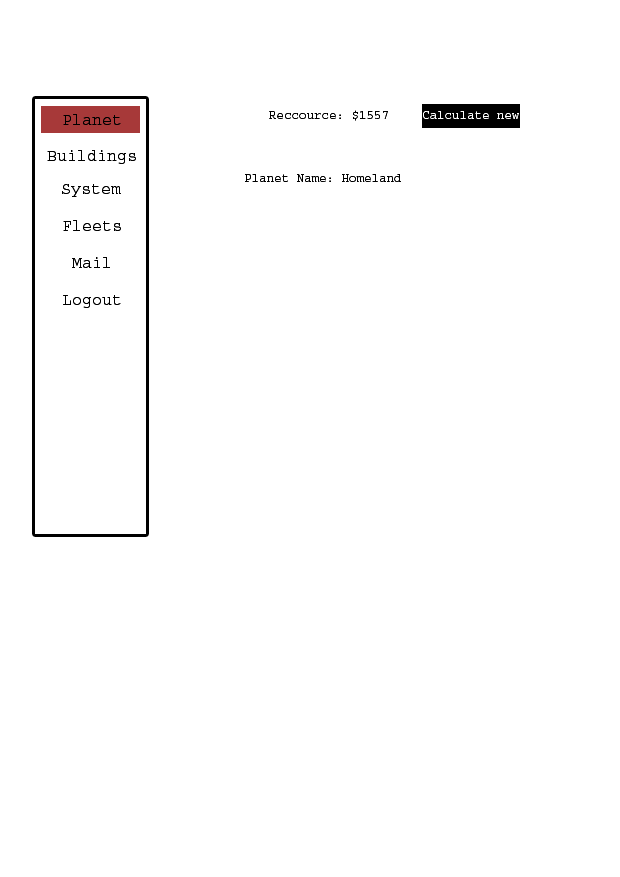
<style>
.page{position:relative;width:620px;height:877px;background:#ffffff}
.page>*{position:absolute;margin:0}
.t1{font:12.5px "Courier";color:#000000}
.t2{font:12.5px "Courier";color:#ffffff}
.t3{font:16.7px "Courier";color:#000000}
</style>
<div class="page">
<p class="t1" style="left:269px;top:110px;width:119px;height:11px">Reccource: $1557</p>
<p class="t2" style="left:423px;top:111px;width:96px;height:8px">Calculate new</p>
<p class="t3" style="left:63px;top:114px;width:58px;height:11px">Planet</p>
<p class="t3" style="left:47px;top:150px;width:89px;height:14px">Buildings</p>
<p class="t1" style="left:245px;top:174px;width:156px;height:8px">Planet Name: Homeland</p>
<p class="t3" style="left:62px;top:184px;width:59px;height:13px">System</p>
<p class="t3" style="left:63px;top:220px;width:58px;height:11px">Fleets</p>
<p class="t3" style="left:72px;top:257px;width:38px;height:11px">Mail</p>
<p class="t3" style="left:63px;top:295px;width:58px;height:13px">Logout</p>
</div>
